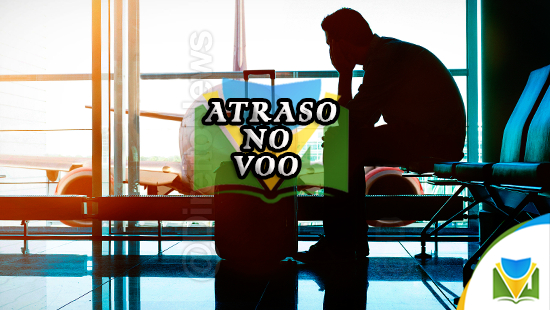
<style>
.page{position:relative;width:550px;height:310px}
.page>*{position:absolute;margin:0}
.t1{font:36.7px/27px "ColonnaMT";letter-spacing:0.1em;color:#fdf8f8;text-transform:uppercase;font-weight:bold;font-style:italic;scale:0.82 1}
.t2{font:36.7px/27px "Tahoma";letter-spacing:0.1em;color:#fdf8f8;text-transform:uppercase;font-weight:bold;font-style:italic;scale:0.82 1}
</style>
<div class="page">
<p class="t1" style="left:205px;top:102px;width:132px;height:74px;text-align:center"><span class="t2">      </span>aTRASO     <br>     nO<br>     voO</p>
</div>
